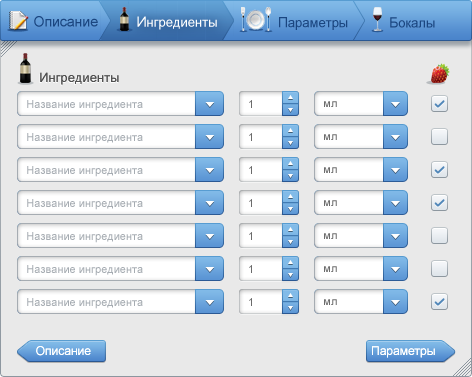
<style>
.page{position:relative;width:472px;height:377px;background:#e9e9e9}
.page>*{position:absolute;margin:0}
.t1{font:14px "ArialMT";color:#1b4680;font-weight:bold}
.t2{font:13px "ArialMT";color:#ffffff;font-weight:bold}
.t3{font:14px "ArialMT";color:#ffffff;font-weight:bold}
.t4{font:13px "ArialMT";color:#1b4680;font-weight:bold}
.t5{font:13px "ArialMT"}
.t6{font:13px "ArialMT";color:#505050}
.t7{font:11px "ArialMT";color:#a6acb2}
.t8{font:11px "ArialMT";color:#6b6b6b}
.t9{font:12px "ArialMT";color:#ffffff}
</style>
<div class="page">
<p class="t1" style="left:34px;top:16px;width:64px;height:11px">Описание</p>
<p class="t2" style="left:137px;top:16px;width:80px;height:14px"><span class="t3">И</span>нгредиенты</p>
<p class="t4" style="left:279px;top:17px;width:69px;height:13px"><span class="t1">П</span>араметры</p>
<p class="t4" style="left:390px;top:17px;width:45px;height:11px"><span class="t1">Б</span>окалы</p>
<p class="t5" style="left:39px;top:73px;width:79px;height:13px">Ингредиенты</p>
<p class="t6" style="left:40px;top:72px;width:79px;height:13px">Ингредиенты</p>
<p class="t7" style="left:27px;top:100px;width:116px;height:11px">Название ингредиента</p>
<p class="t8" style="left:249px;top:100px;width:3px;height:8px">1</p>
<p class="t8" style="left:324px;top:101px;width:13px;height:6px">мл</p>
<p class="t7" style="left:27px;top:133px;width:116px;height:11px">Название ингредиента</p>
<p class="t8" style="left:249px;top:133px;width:3px;height:8px">1</p>
<p class="t8" style="left:324px;top:134px;width:13px;height:6px">мл</p>
<p class="t7" style="left:27px;top:166px;width:116px;height:11px">Название ингредиента</p>
<p class="t8" style="left:249px;top:166px;width:3px;height:8px">1</p>
<p class="t8" style="left:324px;top:167px;width:13px;height:6px">мл</p>
<p class="t7" style="left:27px;top:199px;width:116px;height:11px">Название ингредиента</p>
<p class="t8" style="left:249px;top:199px;width:3px;height:8px">1</p>
<p class="t8" style="left:324px;top:200px;width:13px;height:6px">мл</p>
<p class="t7" style="left:27px;top:232px;width:116px;height:11px">Название ингредиента</p>
<p class="t8" style="left:249px;top:232px;width:3px;height:8px">1</p>
<p class="t8" style="left:324px;top:233px;width:13px;height:6px">мл</p>
<p class="t7" style="left:27px;top:265px;width:116px;height:11px">Название ингредиента</p>
<p class="t8" style="left:249px;top:265px;width:3px;height:8px">1</p>
<p class="t8" style="left:324px;top:266px;width:13px;height:6px">мл</p>
<p class="t7" style="left:27px;top:298px;width:116px;height:11px">Название ингредиента</p>
<p class="t8" style="left:249px;top:298px;width:3px;height:8px">1</p>
<p class="t8" style="left:324px;top:299px;width:13px;height:6px">мл</p>
<p class="t9" style="left:36px;top:346px;width:55px;height:10px">Описание</p>
<p class="t9" style="left:372px;top:346px;width:63px;height:12px">Параметры</p>
</div>
